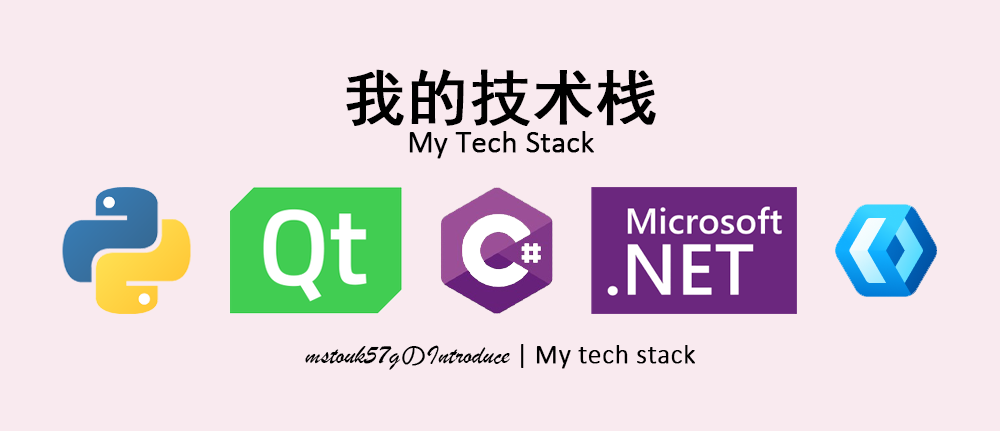
<style>
.page{position:relative;width:1000px;height:431px;background:#f9eaef}
.page>*{position:absolute;margin:0}
.t1{font:30.6px/61.1px "Calibri-Light";color:#000000;font-weight:bold}
.t2{font:61.1px/61.1px "SimHei";color:#000000;font-weight:bold}
.t3{font:27.3px "STXingkai";color:#000000}
.t4{font:27.3px "Calibri";color:#000000}
.t5{font:27.3px "Calibri-Light";color:#000000;font-weight:bold}
</style>
<div class="page">
<p class="t1" style="left:346px;top:69px;width:310px;height:90px;text-align:center"><span class="t2">我的技术栈<br></span>My Tech Stack</p>
<p class="t3" style="left:305px;top:344px;width:390px;height:26px">mstouk57gのIntroduce<span class="t4"> | </span><span class="t5">My tech stack</span></p>
</div>
